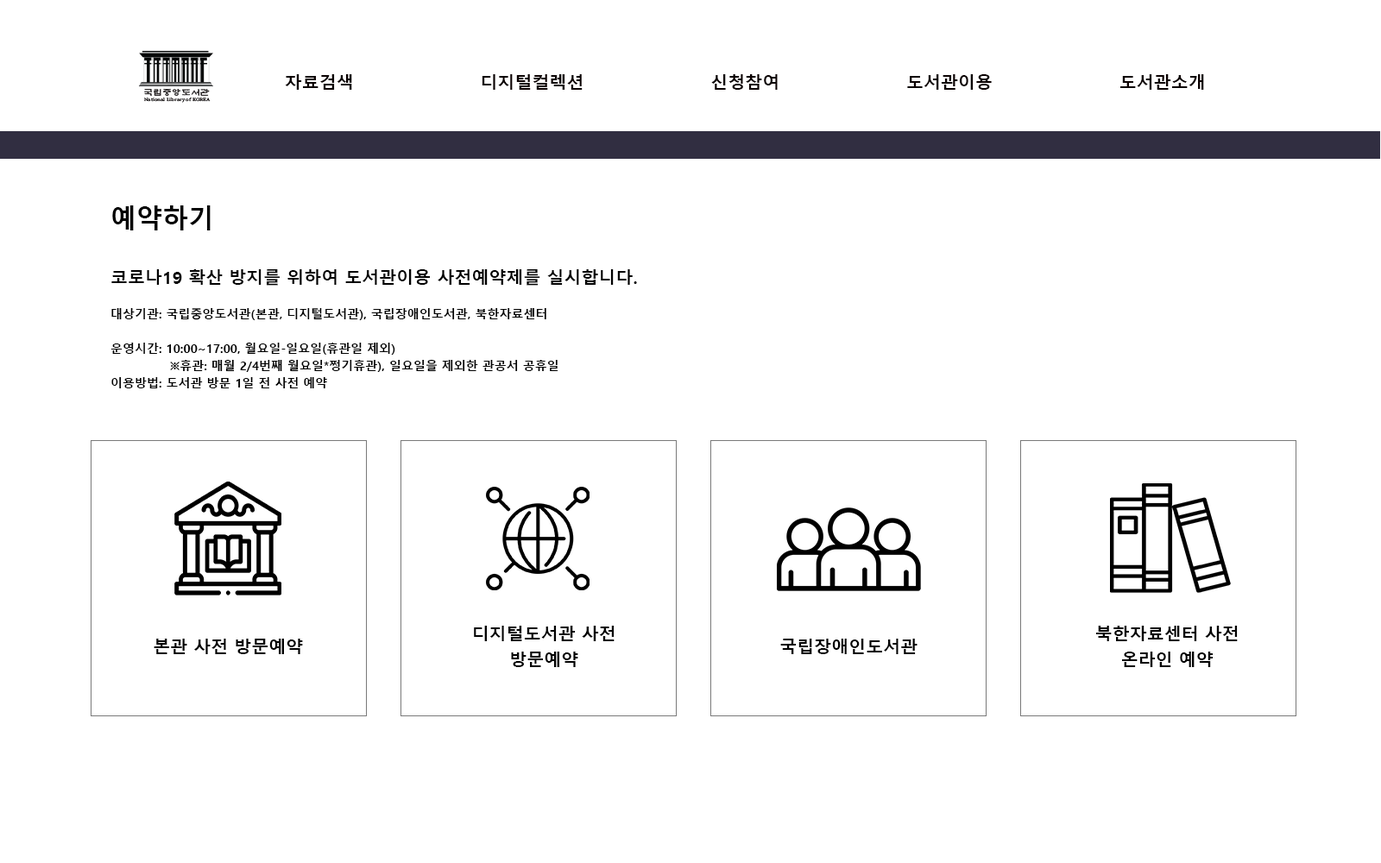
<style>
.page{position:relative;width:1381px;height:863px;background:#ffffff}
.page>*{position:absolute;margin:0}
.t1{font:17.3px "MalgunGothicBold";color:#0b0101}
.t2{font:25.9px "MalgunGothicBold";color:#000000}
.t3{font:12.1px/17.3px "MalgunGothicBold";color:#000000}
.t4{font:17.3px/17.3px "MalgunGothicBold";color:#000000}
.t5{font:17.3px/25.9px "MalgunGothicBold";color:#000000}
.t6{font:17.3px "MalgunGothicBold";color:#000000}
</style>
<div class="page">
<p class="t1" style="left:285px;top:74px;width:919px;height:16px">자료검색 디지털컬렉션 신청참여 도서관이용 도서관소개</p>
<p class="t2" style="left:112px;top:205px;width:99px;height:25px">예약하기</p>
<p class="t3" style="left:111px;top:269px;width:526px;height:119px"><span class="t4">코로나19 확산 방지를 위하여 도서관이용 사전예약제를 실시합니다.<br><br></span>대상기관: 국립중앙도서관(본관, 디지털도서관), 국립장애인도서관, 북한자료센터 <br> <br>운영시간: 10:00~17:00, 월요일-일요일(휴관일 제외)<br>              ※휴관: 매월 2/4번째 월요일*쩡기휴관), 일요일을 제외한 관공서 공휴일<br>이용방법: 도서관 방문 1일 전 사전 예약</p>
<p class="t5" style="left:474px;top:626px;width:141px;height:41px;text-align:center">디지털도서관 사전 방문예약</p>
<p class="t5" style="left:1096px;top:626px;width:142px;height:41px;text-align:center">북한자료센터 사전 온라인 예약</p>
<p class="t6" style="left:154px;top:639px;width:149px;height:15px">본관 사전 방문예약</p>
<p class="t6" style="left:780px;top:639px;width:138px;height:15px">국립장애인도서관</p>
</div>
